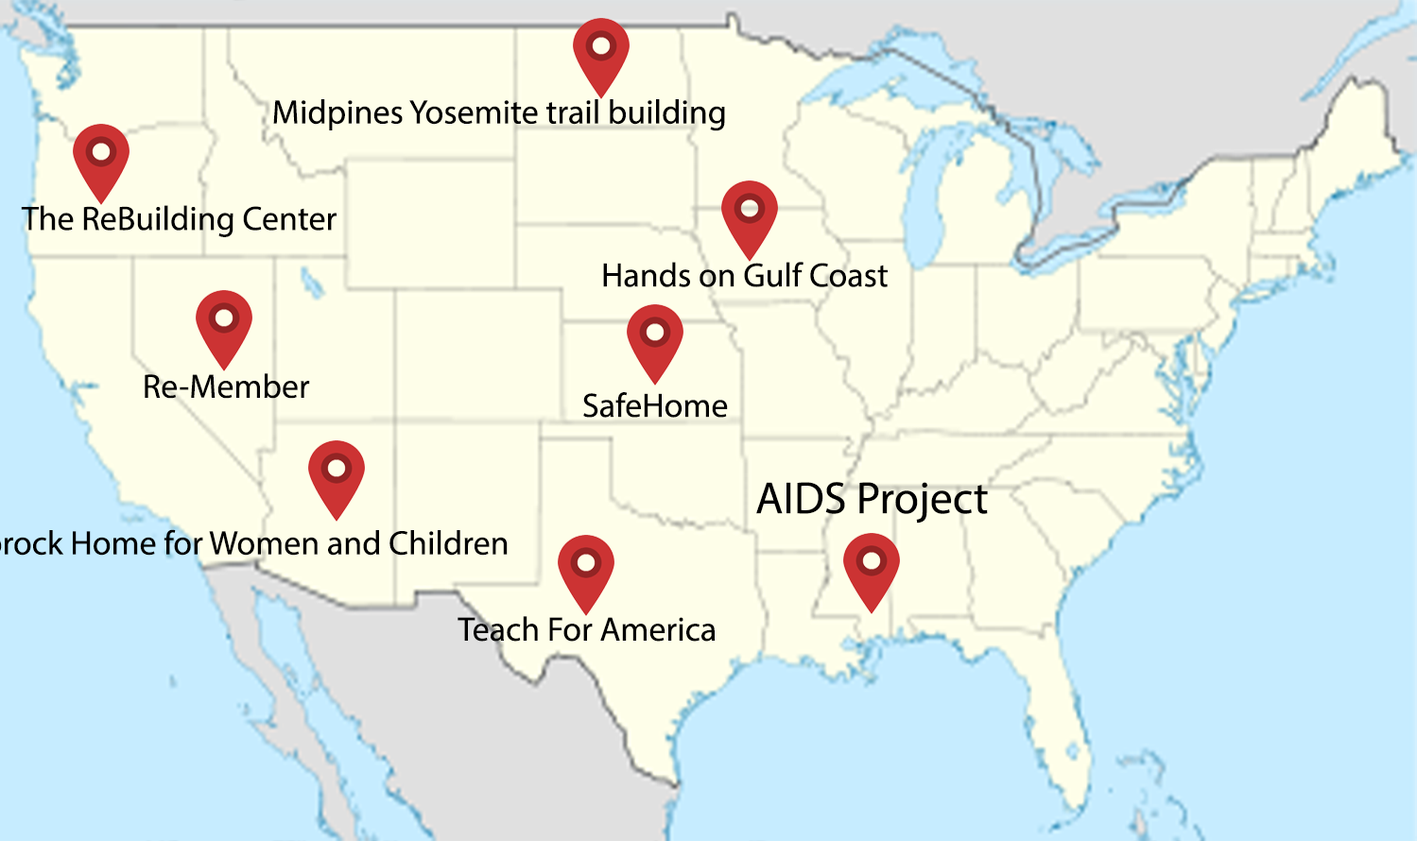
<style>
.page{position:relative;width:1417px;height:841px;background:#fefee9}
.page>*{position:absolute;margin:0}
.t1{font:34px "MyriadPro-Regular";color:#000000}
.t2{font:45.4px "MyriadPro-Regular";color:#000000}
</style>
<div class="page">
<p class="t1" style="left:273px;top:99px;width:452px;height:32px">Midpines Yosemite trail building</p>
<p class="t1" style="left:21px;top:205px;width:316px;height:32px">The ReBuilding Center</p>
<p class="t1" style="left:603px;top:262px;width:285px;height:25px">Hands on Gulf Coast</p>
<p class="t1" style="left:145px;top:373px;width:165px;height:26px">Re-Member</p>
<p class="t1" style="left:583px;top:392px;width:145px;height:26px">SafeHome</p>
<p class="t2" style="left:756px;top:482px;width:232px;height:42px">AIDS Project</p>
<p class="t1" style="left:458px;top:616px;width:258px;height:26px">Teach For America</p>
</div>
